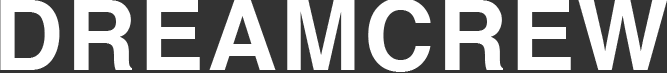
<style>
.page{position:relative;width:667px;height:73px;background:#333333}
.page>*{position:absolute;margin:0}
.t1{font:97px "Helvetica-Bold";letter-spacing:0.03em;color:#ffffff;text-transform:uppercase}
</style>
<div class="page">
<p class="t1" style="left:0px;top:0px;width:667px;height:72px">dreamcrew</p>
</div>
